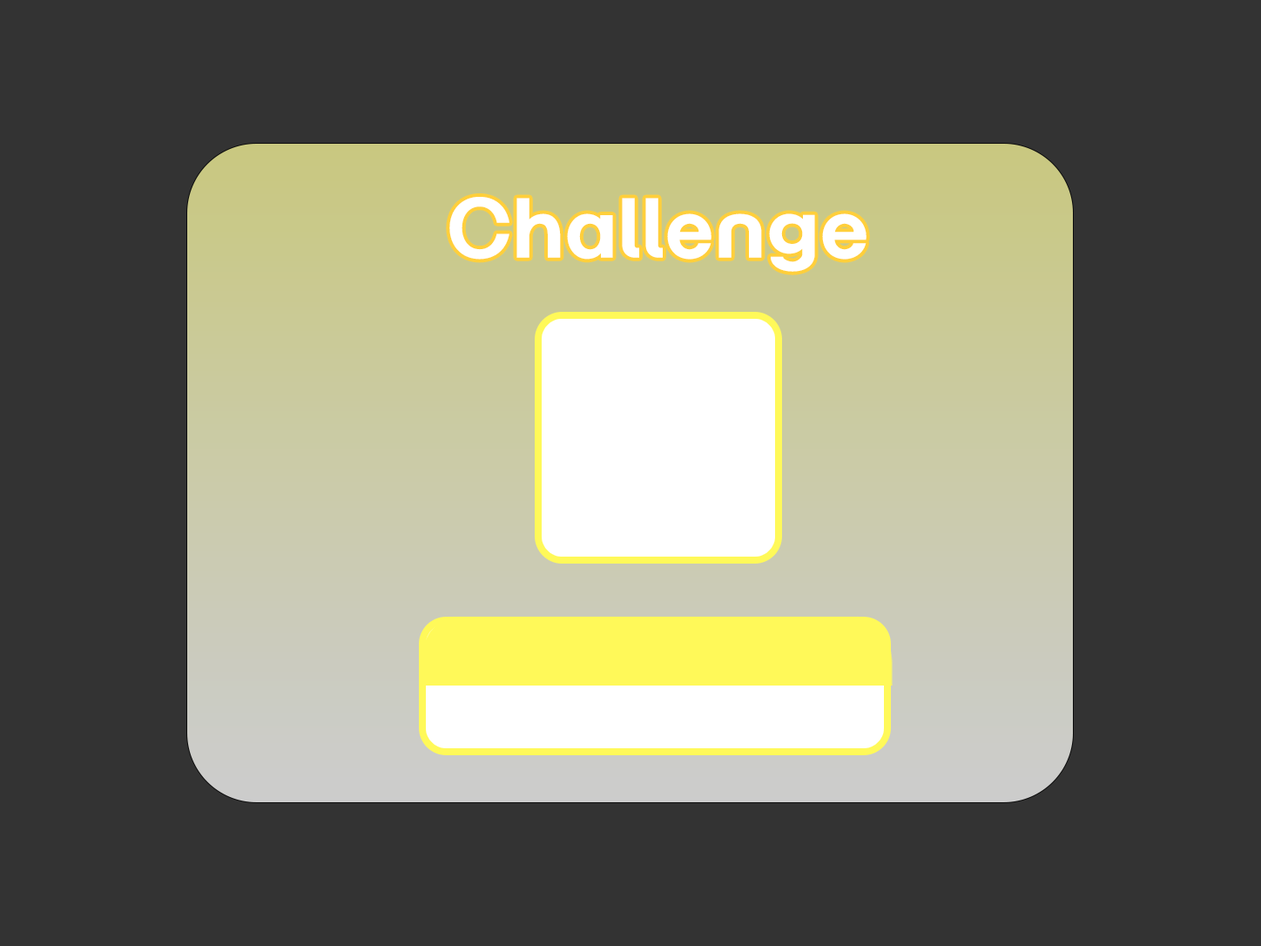
<style>
.page{position:relative;width:1261px;height:946px;background:#333333}
.page>*{position:absolute;margin:0}
.t1{font:65.3px "RiaSans-Bold";color:#ffffff}
</style>
<div class="page">
<p class="t1" style="left:449px;top:197px;width:417px;height:75px">Challenge</p>
</div>
